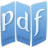
<style>
.page{position:relative;width:48px;height:48px}
.page>*{position:absolute;margin:0}
.t1{font:24px "FertigoPro-Regular";color:#ebf2f8;scale:1.07 1}
.t2{font:24px "FertigoPro-Regular";color:#e4eef7;scale:1.08 1}
.t3{font:24px "FertigoPro-Regular";color:#e7f1f8;scale:1.07 1}
.t4{font:3.9px "SovbaRegular";scale:1.07 1}
.t5{font:3.9px "SovbaRegular";scale:1.06 1}
.t6{font:4px "SovbaRegular";scale:1.07 1}
</style>
<div class="page">
<p class="t1" style="left:2px;top:10px;width:12px;height:21px;rotate:-21deg">p</p>
<p class="t2" style="left:16px;top:11px;width:14px;height:21px;rotate:22deg">d</p>
<p class="t3" style="left:33px;top:8px;width:12px;height:28px;rotate:-21deg">f</p>
<p class="t4" style="left:2px;top:35px;width:13px;height:7px;rotate:-20deg">Splitter</p>
<p class="t5" style="left:17px;top:35px;width:13px;height:6px;rotate:19deg">Splitter</p>
<p class="t6" style="left:33px;top:36px;width:10px;height:6px;rotate:-20deg">Splitter</p>
</div>
